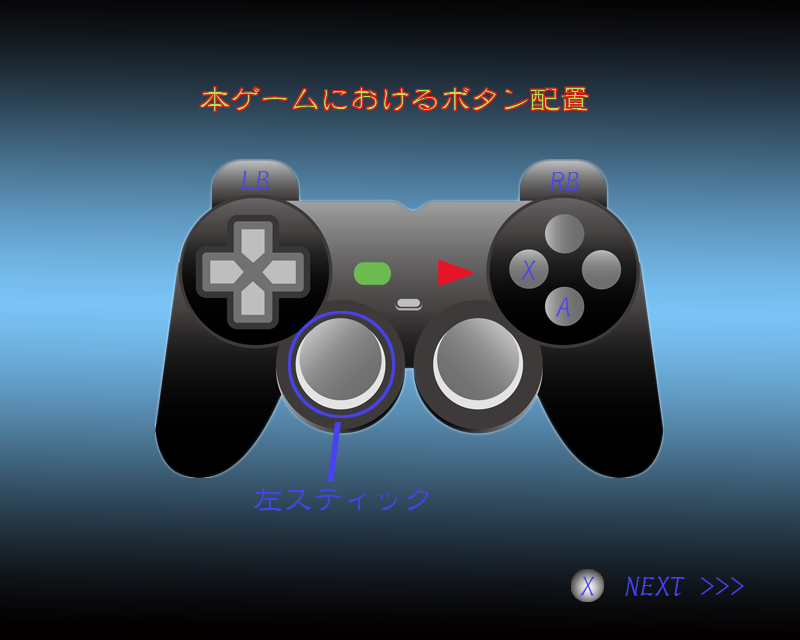
<style>
.page{position:relative;width:800px;height:640px}
.page>*{position:absolute;margin:0}
.t1{font:30px "Reishoreiryu";color:#4843ef}
</style>
<div class="page">
<p class="t1" style="left:241px;top:170px;width:28px;height:20px">LB</p>
<p class="t1" style="left:550px;top:172px;width:29px;height:19px">RB</p>
<p class="t1" style="left:521px;top:260px;width:15px;height:20px">X</p>
<p class="t1" style="left:556px;top:297px;width:14px;height:20px">A</p>
<p class="t1" style="left:253px;top:487px;width:176px;height:24px">左スティック</p>
<p class="t1" style="left:580px;top:576px;width:164px;height:20px">X  NEXT &gt;&gt;&gt;</p>
</div>
